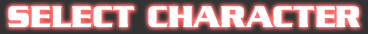
<style>
.page{position:relative;width:368px;height:34px;background:#ffffff}
.page>*{position:absolute;margin:0}
.t1{font:32.3px "Babylon5";color:#ffffff}
</style>
<div class="page">
<p class="t1" style="left:8px;top:6px;width:352px;height:21px">SELECT CHARACTER</p>
</div>
